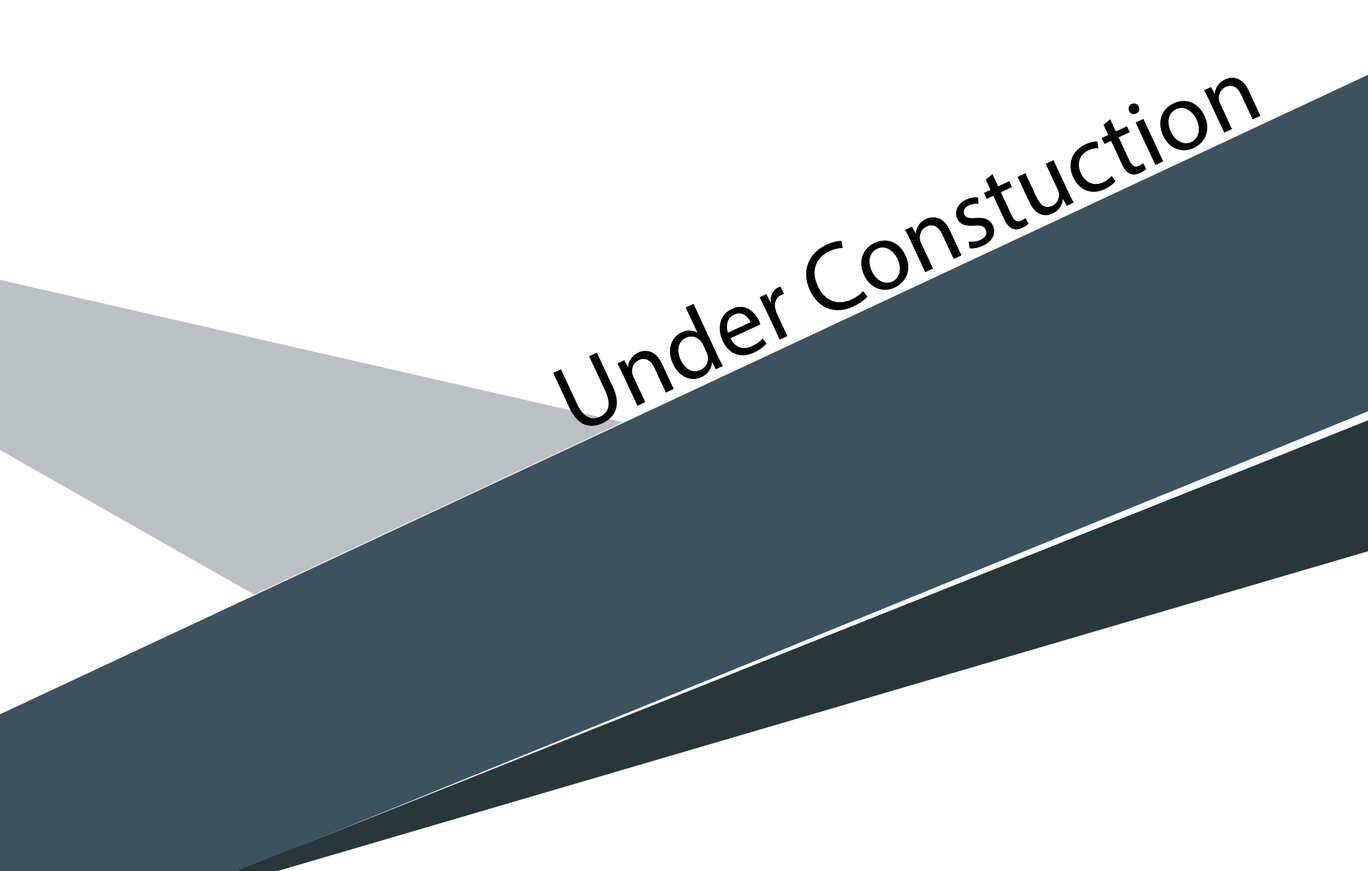
<style>
.page{position:relative;width:1368px;height:871px;background:#ffffff}
.page>*{position:absolute;margin:0}
.t1{font:96.8px "MyriadPro-Regular";color:#000000}
</style>
<div class="page">
<p class="t1" style="left:553px;top:77px;width:708px;height:349px;rotate:-25deg">Under Constuction</p>
</div>
